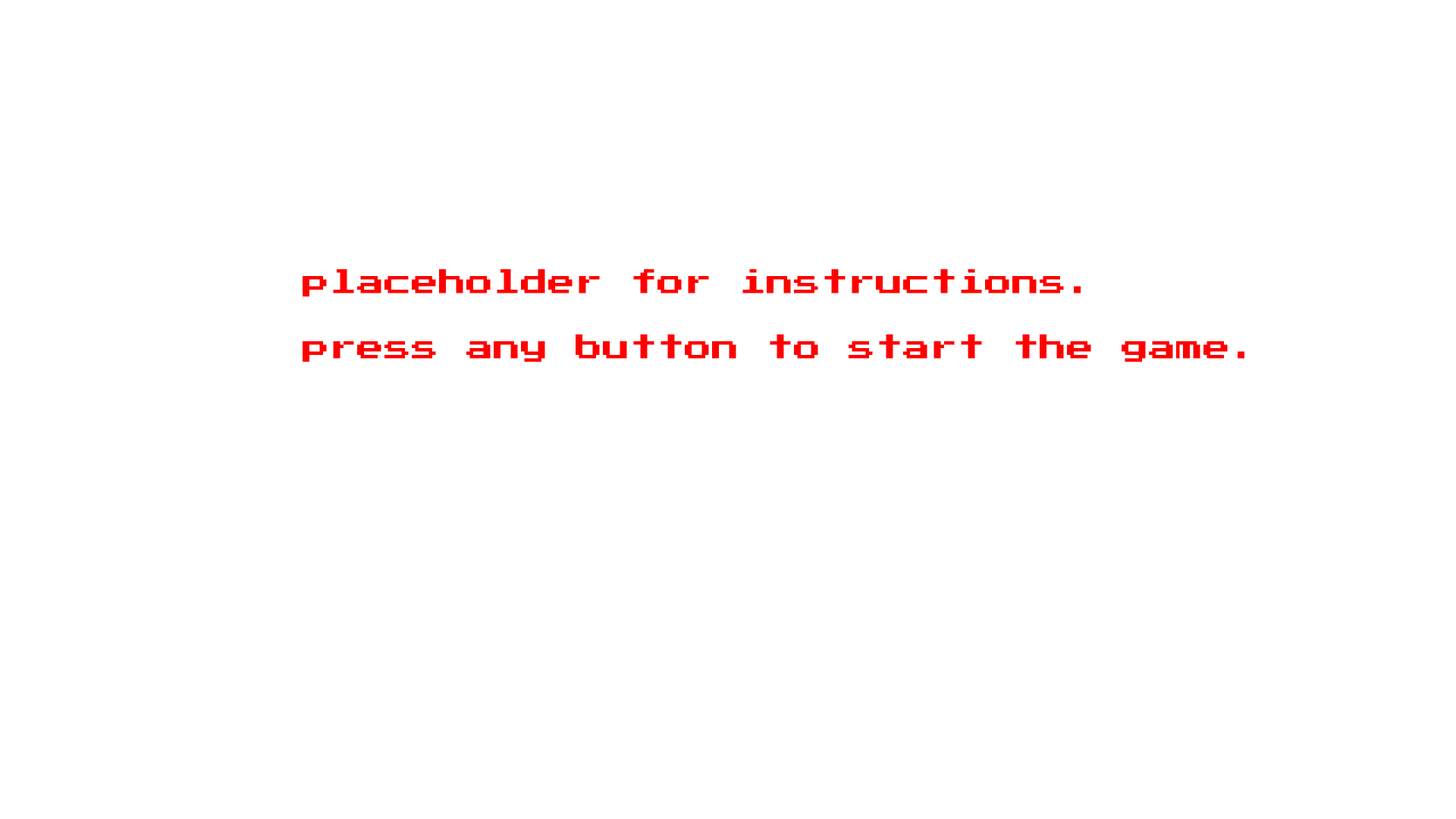
<style>
.page{position:relative;width:1456px;height:819px;background:#ffffff}
.page>*{position:absolute;margin:0}
.t1{font:27.3px "PressStart2P-Regular";color:#ff0000}
</style>
<div class="page">
<p class="t1" style="left:303px;top:269px;width:941px;height:93px">placeholder for instructions.<br><br>press any button to start the game.</p>
</div>
